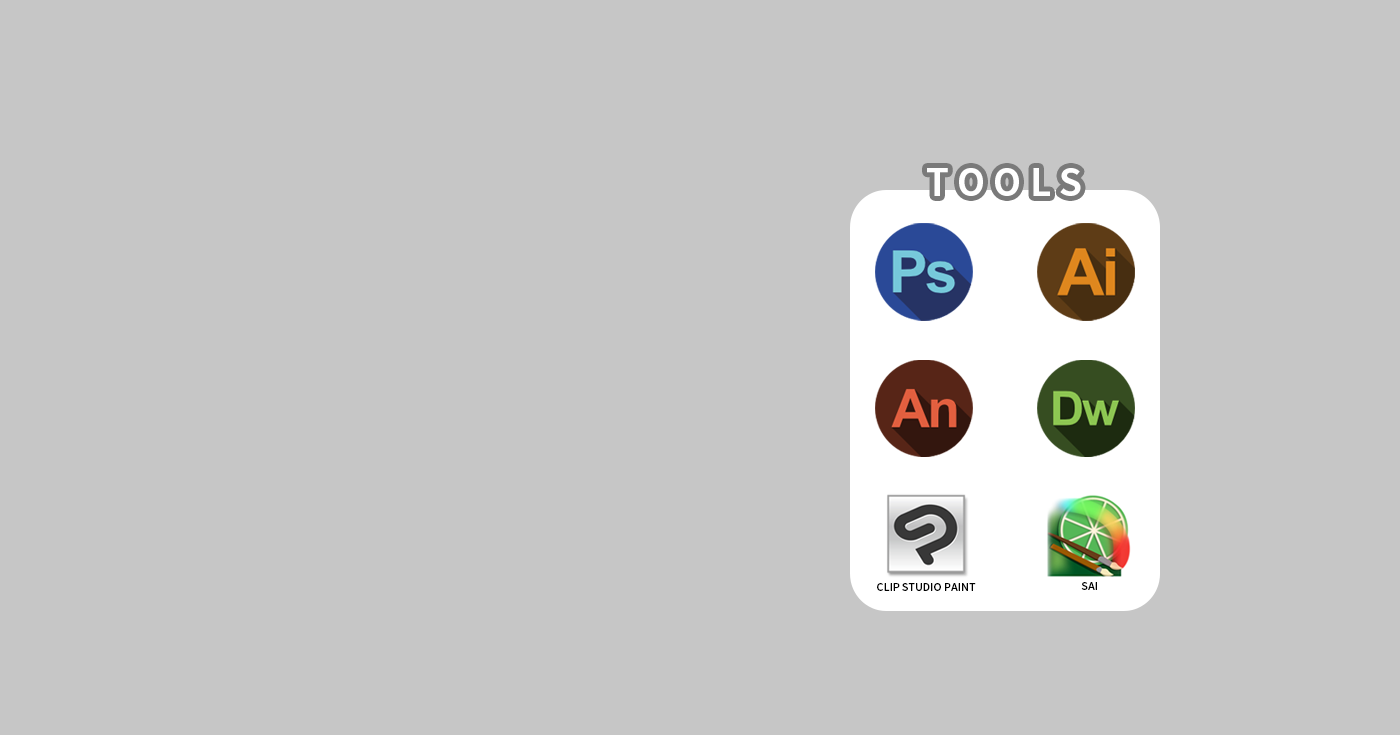
<style>
.page{position:relative;width:1400px;height:735px;background:#c6c6c6}
.page>*{position:absolute;margin:0}
.t1{font:36.6px "NotoSansHant-Bold";color:#ffffff}
.t2{font:10.7px "NotoSansHant-Medium";color:#000000}
</style>
<div class="page">
<p class="t1" style="left:927px;top:168px;width:154px;height:28px">T O O L S</p>
<p class="t2" style="left:1081px;top:582px;width:16px;height:8px">SAI</p>
<p class="t2" style="left:877px;top:583px;width:99px;height:8px">CLIP STUDIO PAINT</p>
</div>
